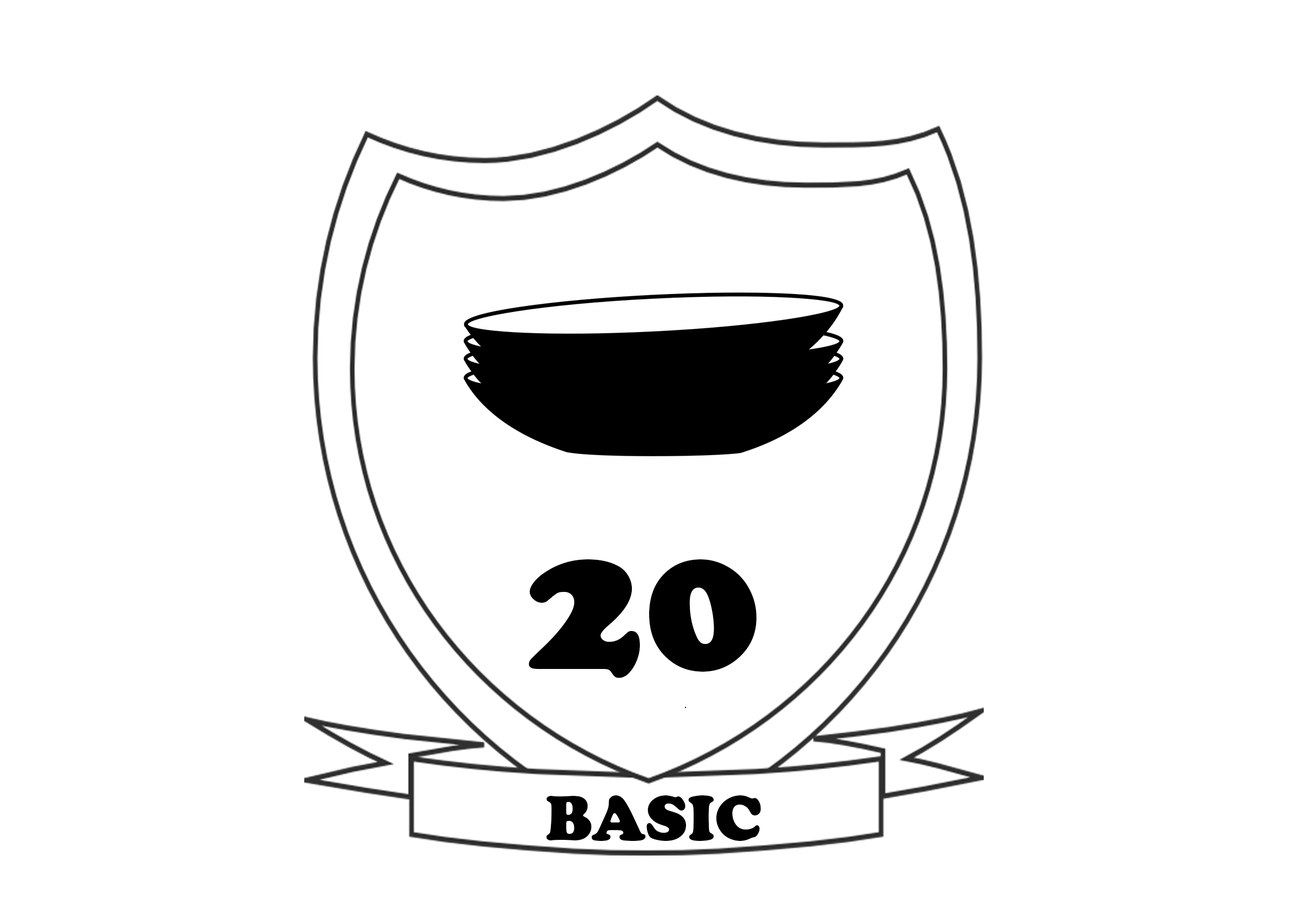
<style>
.page{position:relative;width:1307px;height:912px;background:#ffffff}
.page>*{position:absolute;margin:0}
.t1{font:195.3px "CooperBlack";color:#000000}
.t2{font:65.1px "CooperBlack";color:#000000}
</style>
<div class="page">
<p class="t1" style="left:529px;top:559px;width:228px;height:119px">20</p>
<p class="t2" style="left:546px;top:795px;width:215px;height:46px">BASIC</p>
</div>
